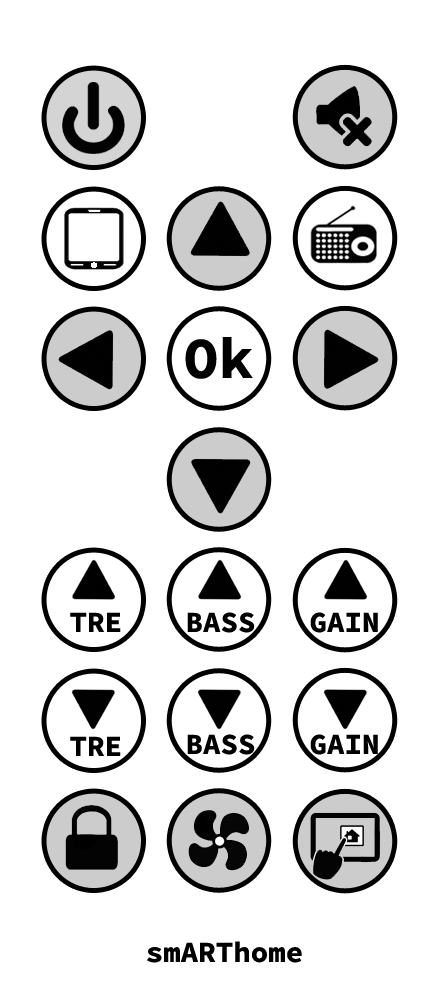
<style>
.page{position:relative;width:443px;height:992px;background:#ffffff}
.page>*{position:absolute;margin:0}
.t1{font:58.3px "SourceCodePro-Bold";color:#000000}
.t2{font:29.2px "SourceCodePro-Bold";color:#000000}
</style>
<div class="page">
<p class="t1" style="left:185px;top:337px;width:68px;height:42px">Ok</p>
<p class="t2" style="left:70px;top:612px;width:51px;height:20px">TRE</p>
<p class="t2" style="left:187px;top:612px;width:68px;height:21px">BASS</p>
<p class="t2" style="left:310px;top:612px;width:68px;height:21px">GAIN</p>
<p class="t2" style="left:70px;top:736px;width:51px;height:20px">TRE</p>
<p class="t2" style="left:187px;top:734px;width:68px;height:21px">BASS</p>
<p class="t2" style="left:310px;top:734px;width:68px;height:21px">GAIN</p>
<p class="t2" style="left:147px;top:941px;width:155px;height:22px">smARThome</p>
</div>
